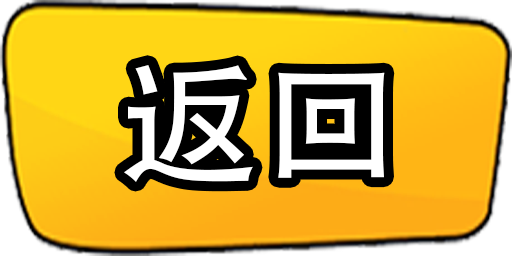
<style>
.page{position:relative;width:512px;height:256px}
.page>*{position:absolute;margin:0}
.t1{font:133.3px "AdobeHeitiStd-Regular";letter-spacing:0.012em;color:#ffffff;scale:1.05 1}
</style>
<div class="page">
<p class="t1" style="left:124px;top:65px;width:261px;height:117px">返回</p>
</div>
